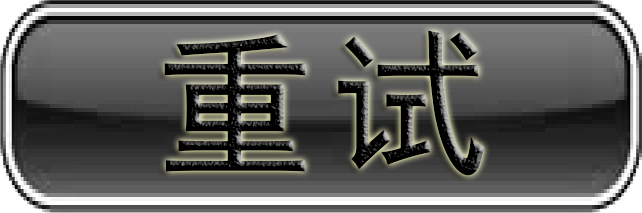
<style>
.page{position:relative;width:642px;height:213px}
.page>*{position:absolute;margin:0}
.t1{font:157.5px "SimHei";letter-spacing:0.075em;color:#000000;font-weight:bold}
</style>
<div class="page">
<p class="t1" style="left:164px;top:30px;width:320px;height:146px">重试</p>
</div>
